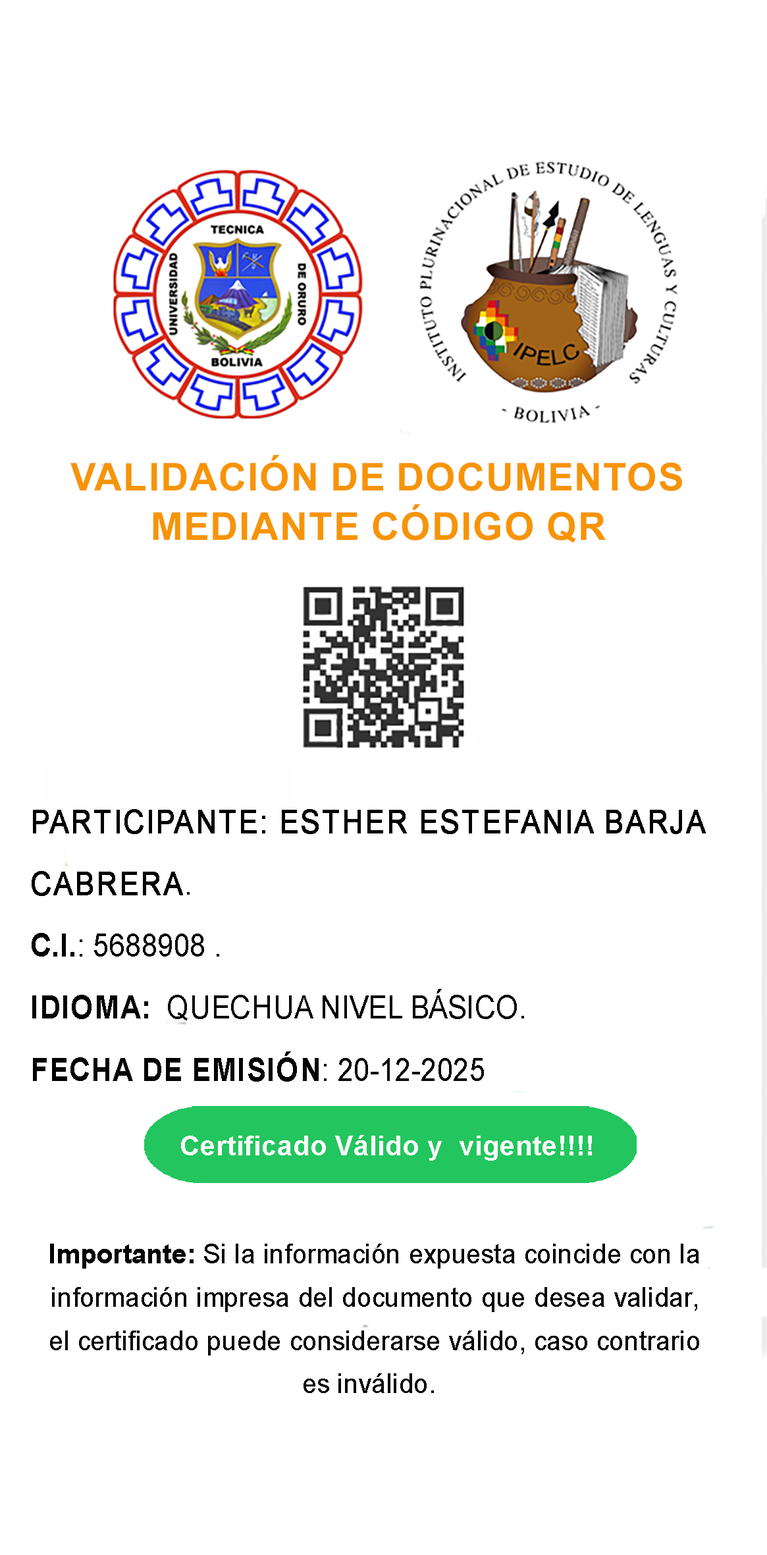
<style>
.page{position:relative;width:767px;height:1555px;background:#ffffff}
.page>*{position:absolute;margin:0}
.t1{font:38.4px/49.4px "Arial-BoldMT";color:#f79406;text-transform:uppercase}
.t2{font:31.8px/62px "ArialMT";letter-spacing:0.01em;color:#020202;text-transform:uppercase;font-weight:bold;scale:0.9 1}
.t3{font:32.3px/62px "ArialMT";letter-spacing:0.01em;color:#020202;scale:0.9 1}
.t4{font:31.8px/62px "Arial-BoldMT";letter-spacing:0.01em;color:#020202;text-transform:uppercase;scale:0.9 1}
.t5{font:31.8px/62px "ArialMT";letter-spacing:0.01em;color:#020202;text-transform:uppercase;scale:0.9 1}
.t6{font:31.8px/62px "ArialMT";letter-spacing:0.01em;color:#020202;scale:0.9 1}
.t7{font:27.4px "Arial-BoldMT";letter-spacing:0.01em;color:#fcfbfb}
.t8{font:27.1px/43.3px "ArialMT";color:#030303;scale:0.96 1}
.t9{font:27.1px/43.3px "Arial-BoldMT";color:#030303;scale:0.96 1}
</style>
<div class="page">
<p class="t1" style="left:70px;top:455px;width:612px;height:88px;text-align:center">validación de documentos<br>mediante código qr</p>
<p class="t2" style="left:32px;top:809px;width:674px;height:273px">Participante: esther estefania barja cabrera<span class="t3">.<br></span><span class="t4">C.I.</span><span class="t5">: 5688908 </span><span class="t6">.<br></span><span class="t4">IDIOMA: </span><span class="t6"> QUECHUA NIVEL BÁSICO.<br></span><span class="t4">FECHA DE EMISIÓN</span><span class="t5">: 20-12-2025</span></p>
<p class="t7" style="left:181px;top:1135px;width:411px;height:26px">Certificado Válido y  vigente!!!!</p>
<p class="t8" style="left:50px;top:1244px;width:649px;height:149px;text-align:center"><span class="t9">Importante: </span>Si la información expuesta coincide con la información impresa del documento que desea validar, <br>el certificado puede considerarse válido, caso contrario <br>es inválido.</p>
</div>
